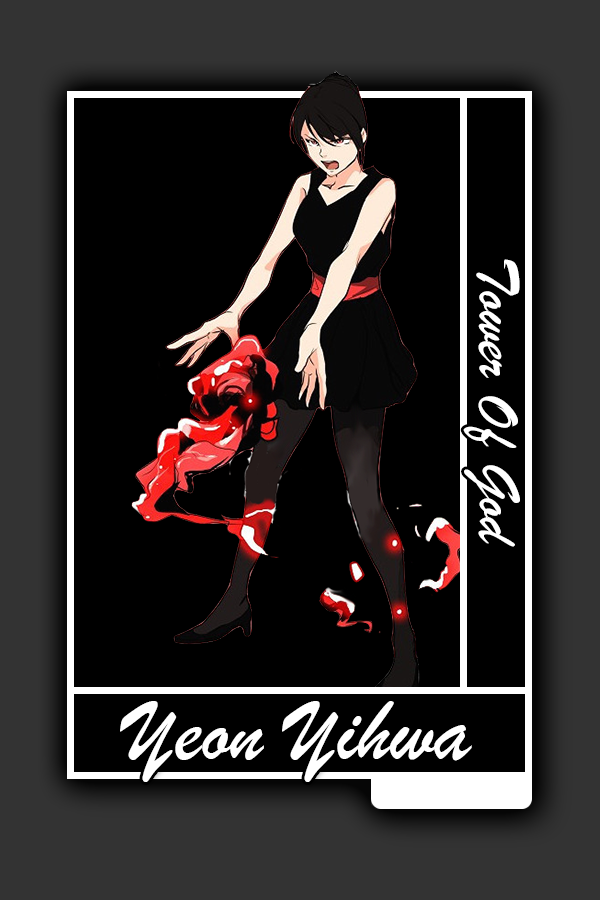
<style>
.page{position:relative;width:600px;height:900px;background:#000000}
.page>*{position:absolute;margin:0}
.t1{font:61.5px "BrushScriptMT";color:#ffffff}
.t2{font:89.7px "BrushScriptMT";color:#ffffff}
</style>
<div class="page">
<p class="t1" style="left:463px;top:259px;width:57px;height:288px;rotate:90deg">Tower Of God</p>
<p class="t2" style="left:120px;top:701px;width:352px;height:81px">Yeon Yihwa</p>
</div>
